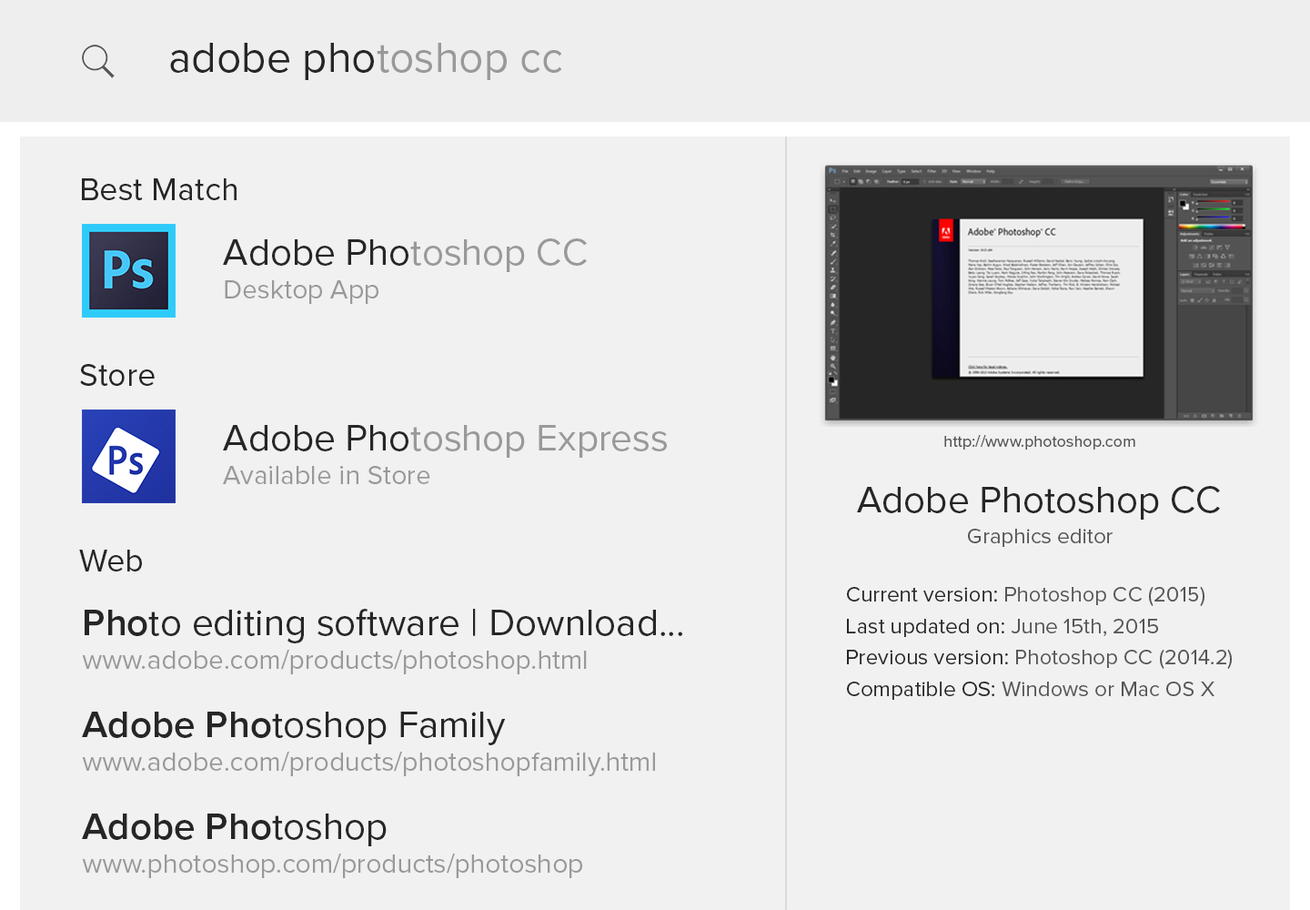
<style>
.page{position:relative;width:1310px;height:910px;background:#f1f1f1}
.page>*{position:absolute;margin:0}
.t1{font:43.7px "ProximaNova-Regular";color:#262626}
.t2{font:43.7px "ProximaNova-Regular";color:#999999}
.t3{font:32.8px "ProximaNova-Regular";color:#262626}
.t4{font:38.2px "ProximaNova-Regular";color:#262626}
.t5{font:38.2px "ProximaNova-Regular";color:#999999}
.t6{font:27.3px "ProximaNova-Regular";color:#999999}
.t7{font:16.4px "ProximaNova-Regular";color:#555555}
.t8{font:21.8px "ProximaNova-Regular";color:#555555}
.t9{font:21.8px "ProximaNova-Regular";color:#262626}
.t10{font:38.2px "ProximaNova-Semibold";color:#262626}
</style>
<div class="page">
<p class="t1" style="left:170px;top:43px;width:392px;height:37px">adobe pho<span class="t2">toshop cc</span></p>
<p class="t3" style="left:82px;top:178px;width:155px;height:22px">Best Match</p>
<p class="t4" style="left:223px;top:238px;width:364px;height:34px">Adobe Pho<span class="t5">toshop CC</span></p>
<p class="t6" style="left:225px;top:280px;width:154px;height:24px">Desktop App</p>
<p class="t3" style="left:80px;top:364px;width:75px;height:22px">Store</p>
<p class="t5" style="left:223px;top:425px;width:444px;height:33px"><span class="t4">Adobe Pho</span>toshop Express</p>
<p class="t7" style="left:945px;top:435px;width:191px;height:15px">http://www.photoshop.com</p>
<p class="t6" style="left:223px;top:466px;width:207px;height:18px">Available in Store</p>
<p class="t4" style="left:857px;top:486px;width:363px;height:34px">Adobe Photoshop CC</p>
<p class="t8" style="left:968px;top:529px;width:145px;height:18px">Graphics editor</p>
<p class="t3" style="left:79px;top:550px;width:63px;height:21px">Web</p>
<p class="t8" style="left:847px;top:586px;width:358px;height:20px"><span class="t9">Current version:</span> Photoshop CC (2015)</p>
<p class="t4" style="left:85px;top:609px;width:597px;height:34px"><span class="t10">Pho</span>to editing software | Download...</p>
<p class="t9" style="left:847px;top:619px;width:311px;height:18px">Last updated on: <span class="t8">June 15th, 2015</span></p>
<p class="t6" style="left:82px;top:650px;width:505px;height:24px">www.adobe.com/products/photoshop.html</p>
<p class="t8" style="left:847px;top:649px;width:385px;height:20px"><span class="t9">Previous version: </span>Photoshop CC (2014.2)</p>
<p class="t8" style="left:847px;top:682px;width:368px;height:18px"><span class="t9">Compatible OS: </span>Windows or Mac OS X</p>
<p class="t4" style="left:82px;top:712px;width:424px;height:33px"><span class="t10">Adobe Pho</span>toshop Family</p>
<p class="t6" style="left:82px;top:752px;width:573px;height:24px">www.adobe.com/products/photoshopfamily.html</p>
<p class="t10" style="left:82px;top:814px;width:305px;height:32px">Adobe Pho<span class="t4">toshop</span></p>
<p class="t6" style="left:82px;top:854px;width:500px;height:24px">www.photoshop.com/products/photoshop</p>
</div>
